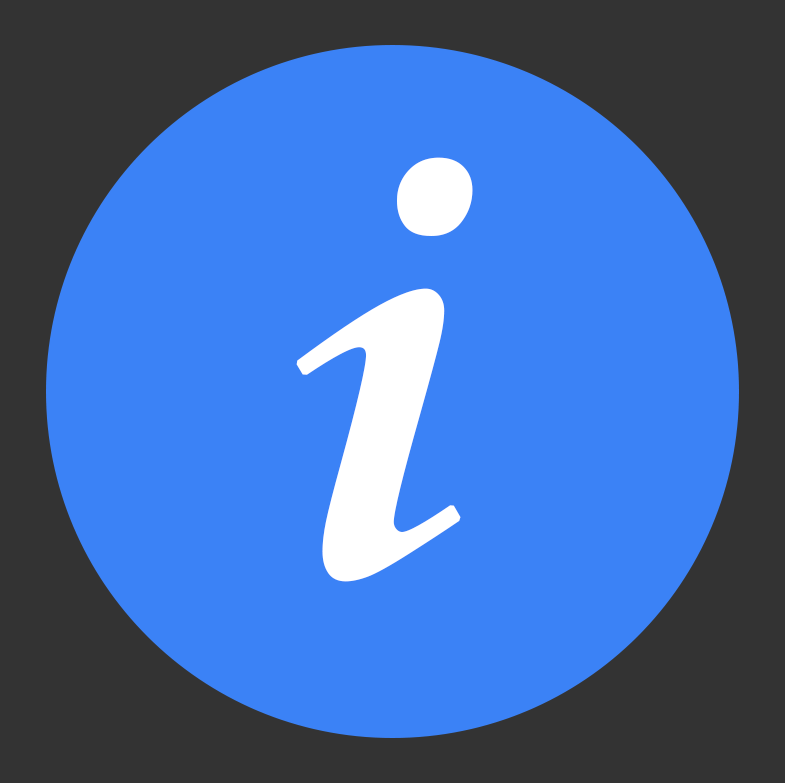
<style>
.page{position:relative;width:785px;height:783px;background:#3b82f6}
.page>*{position:absolute;margin:0}
.t1{font:586.8px "PalatinoLinotype-BoldItalic";color:#ffffff;scale:1.05 1}
</style>
<div class="page">
<p class="t1" style="left:296px;top:157px;width:177px;height:425px">i</p>
</div>
